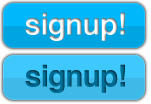
<style>
.page{position:relative;width:151px;height:104px}
.page>*{position:absolute;margin:0}
.t1{font:30px "Helvetica-Bold";letter-spacing:-0.025em}
.t2{font:30px "Helvetica-Bold";letter-spacing:-0.025em;color:#006e96}
</style>
<div class="page">
<p class="t1" style="left:25px;top:12px;width:100px;height:29px">signup!</p>
<p class="t2" style="left:25px;top:64px;width:100px;height:29px">signup!</p>
</div>
